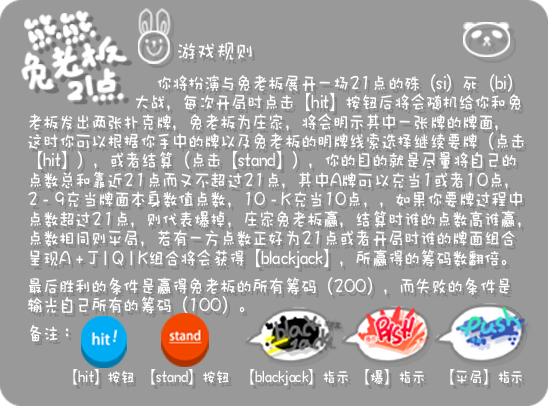
<style>
.page{position:relative;width:548px;height:406px;background:#999999}
.page>*{position:absolute;margin:0}
.t1{font:23.5px "DFWaWaSC-W5";color:#ffffff;scale:0.83 1}
.t2{font:19.5px/19.5px "DFWaWaSC-W5";color:#ffffff;scale:0.83 1}
.t3{font:19.5px "DFWaWaSC-W5";color:#ffffff;scale:0.83 1}
.t4{font:16.7px "DFWaWaSC-W5";color:#ffffff;scale:0.83 1}
</style>
<div class="page">
<p class="t1" style="left:178px;top:42px;width:74px;height:18px">游戏规则</p>
<p class="t2" style="left:28px;top:74px;width:496px;height:194px">你将扮演与兔老板展开一场21点的殊（si）死（bi）<br>                    大战，每次开局时点击【hit】按钮后将会随机给你和兔<br>老板发出两张扑克牌，兔老板为庄家，将会明示其中一张牌的牌面，<br>这时你可以根据你手中的牌以及兔老板的明牌线索选择继续要牌（点击<br>【hit】），或者结算（点击【stand】），你的目的就是尽量将自己的<br>点数总和靠近21点而又不超过21点，其中A牌可以充当1或者10点，<br>2 - 9充当牌面本身数值点数，10 - K充当10点，，如果你要牌过程中<br>点数超过21点，则代表爆掉，庄家兔老板赢，结算时谁的点数高谁赢，<br>点数相同则平局，若有一方点数正好为21点或者开局时谁的牌面组合<br>呈现A + J | Q | K组合将会获得【blackjack】，所赢得的筹码数翻倍。</p>
<p class="t2" style="left:28px;top:277px;width:482px;height:37px">最后胜利的条件是赢得兔老板的所有筹码（200），而失败的条件是<br>输光自己所有的筹码（100）。</p>
<p class="t3" style="left:30px;top:324px;width:39px;height:18px">备注：</p>
<p class="t4" style="left:73px;top:369px;width:61px;height:16px">【hit】按钮</p>
<p class="t4" style="left:151px;top:369px;width:78px;height:16px">【stand】按钮</p>
<p class="t4" style="left:250px;top:369px;width:98px;height:17px">【blackjack】指示</p>
<p class="t4" style="left:365px;top:369px;width:59px;height:16px">【爆】指示</p>
<p class="t4" style="left:450px;top:369px;width:72px;height:16px">【平局】指示</p>
</div>
